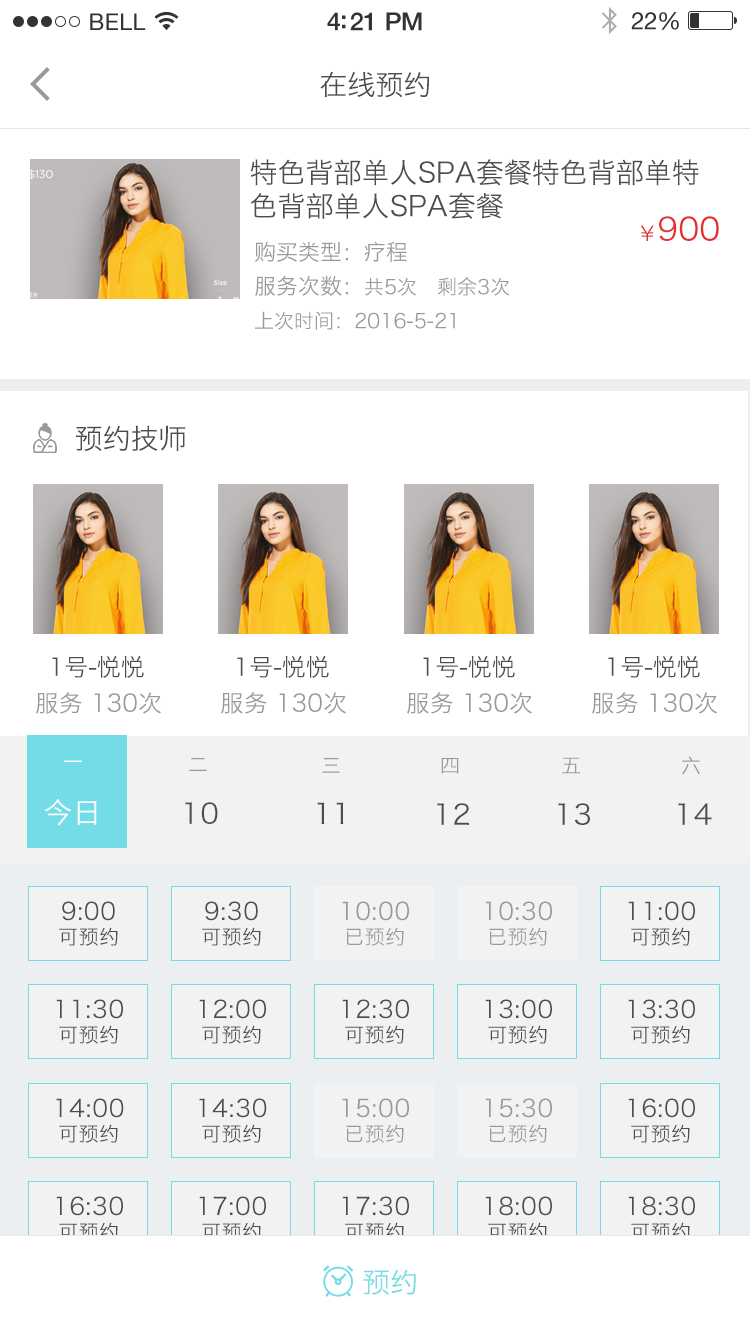
<style>
.page{position:relative;width:750px;height:1334px;background:#ffffff}
.page>*{position:absolute;margin:0}
.t1{font:28px "HiraginoSansGB-W3";color:#4d4d4d}
.t2{font:32px "HiraginoSansGB-W3";color:#e42f2f}
.t3{font:20px "HiraginoSansGB-W3";color:#999999}
.t4{font:20px "HiraginoSansGB-W3";color:#e42f2f}
.t5{font:20px/34px "HiraginoSansGB-W3";color:#999999}
.t6{font:22px/34px "HiraginoSansGB-W3";color:#999999}
.t7{font:24px "HiraginoSansGB-W3";color:#4d4d4d}
.t8{font:24px "HiraginoSansGB-W3";color:#999999}
.t9{font:20px "HiraginoSansGB-W3";letter-spacing:0.03em;color:#ffffff}
.t10{font:20px "HiraginoSansGB-W3";letter-spacing:0.03em;color:#999999}
.t11{font:28px "HiraginoSansGB-W3";letter-spacing:0.03em;color:#ffffff}
.t12{font:28px "HiraginoSansGB-W3";letter-spacing:0.03em;color:#4d4d4d}
.t13{font:24px/24px "HiraginoSansGB-W3";letter-spacing:0.03em;color:#4d4d4d}
.t14{font:20px/24px "HiraginoSansGB-W3";letter-spacing:0.03em;color:#4d4d4d}
.t15{font:24px/24px "HiraginoSansGB-W3";letter-spacing:0.03em;color:#999999}
.t16{font:20px/24px "HiraginoSansGB-W3";letter-spacing:0.03em;color:#999999}
.t17{font:28px "HiraginoSansGB-W3";color:#73dce6}
</style>
<div class="page">
<p class="t1" style="left:320px;top:71px;width:109px;height:27px">在线预约</p>
<p class="t1" style="left:250px;top:159px;width:449px;height:60px;text-align:justify">特色背部单人SPA套餐特色背部单特<br>色背部单人SPA套餐</p>
<p class="t2" style="left:640px;top:216px;width:79px;height:25px"><span class="t3">                                        </span><span class="t4">￥</span>900</p>
<p class="t5" style="left:254px;top:241px;width:256px;height:89px;text-align:justify"><span class="t6">购买类型：疗程<br>服务次数：</span>共5次   剩余3次<br>上次时间：2016-5-21</p>
<p class="t1" style="left:76px;top:425px;width:110px;height:27px">预约技师</p>
<p class="t7" style="left:52px;top:656px;width:92px;height:22px">1号-悦悦</p>
<p class="t7" style="left:237px;top:656px;width:92px;height:22px">1号-悦悦</p>
<p class="t7" style="left:423px;top:656px;width:92px;height:22px">1号-悦悦</p>
<p class="t7" style="left:608px;top:656px;width:92px;height:22px">1号-悦悦</p>
<p class="t8" style="left:36px;top:692px;width:125px;height:22px"><span class="t3">                                       </span>服务 130次</p>
<p class="t8" style="left:221px;top:692px;width:125px;height:22px"><span class="t3">                                       </span>服务 130次</p>
<p class="t8" style="left:407px;top:692px;width:125px;height:22px"><span class="t3">                                       </span>服务 130次</p>
<p class="t8" style="left:592px;top:692px;width:125px;height:22px"><span class="t3">                                       </span>服务 130次</p>
<p class="t9" style="left:64px;top:760px;width:18px;height:3px">一</p>
<p class="t10" style="left:189px;top:757px;width:18px;height:15px">二</p>
<p class="t10" style="left:322px;top:757px;width:18px;height:16px">三</p>
<p class="t10" style="left:441px;top:758px;width:18px;height:16px">四</p>
<p class="t10" style="left:562px;top:757px;width:18px;height:17px">五</p>
<p class="t10" style="left:681px;top:756px;width:19px;height:19px">六</p>
<p class="t11" style="left:44px;top:799px;width:53px;height:27px">今日</p>
<p class="t12" style="left:185px;top:802px;width:33px;height:22px">10</p>
<p class="t12" style="left:317px;top:802px;width:27px;height:22px">11</p>
<p class="t12" style="left:437px;top:803px;width:32px;height:22px">12</p>
<p class="t12" style="left:558px;top:803px;width:32px;height:22px">13</p>
<p class="t12" style="left:678px;top:803px;width:34px;height:22px">14</p>
<p class="t13" style="left:59px;top:901px;width:59px;height:45px;text-align:center">9:00<br><span class="t14">可预约</span></p>
<p class="t13" style="left:202px;top:901px;width:59px;height:45px;text-align:center">9:30<br><span class="t14">可预约</span></p>
<p class="t15" style="left:342px;top:901px;width:67px;height:45px;text-align:center">10:00<br><span class="t16">已预约</span></p>
<p class="t15" style="left:485px;top:901px;width:67px;height:45px;text-align:center">10:30<br><span class="t16">已预约</span></p>
<p class="t13" style="left:628px;top:901px;width:67px;height:45px;text-align:center">11:00<br><span class="t14">可预约</span></p>
<p class="t13" style="left:56px;top:999px;width:67px;height:45px;text-align:center">11:30<br><span class="t14">可预约</span></p>
<p class="t13" style="left:199px;top:999px;width:67px;height:45px;text-align:center">12:00<br><span class="t14">可预约</span></p>
<p class="t13" style="left:342px;top:999px;width:67px;height:45px;text-align:center">12:30<br><span class="t14">可预约</span></p>
<p class="t13" style="left:485px;top:999px;width:67px;height:45px;text-align:center">13:00<br><span class="t14">可预约</span></p>
<p class="t13" style="left:628px;top:999px;width:67px;height:45px;text-align:center">13:30<br><span class="t14">可预约</span></p>
<p class="t13" style="left:56px;top:1098px;width:68px;height:45px;text-align:center">14:00<br><span class="t14">可预约</span></p>
<p class="t13" style="left:199px;top:1098px;width:68px;height:45px;text-align:center">14:30<br><span class="t14">可预约</span></p>
<p class="t15" style="left:342px;top:1098px;width:67px;height:45px;text-align:center">15:00<br><span class="t16">已预约</span></p>
<p class="t15" style="left:485px;top:1098px;width:67px;height:45px;text-align:center">15:30<br><span class="t16">已预约</span></p>
<p class="t13" style="left:628px;top:1098px;width:67px;height:45px;text-align:center">16:00<br><span class="t14">可预约</span></p>
<p class="t13" style="left:56px;top:1196px;width:67px;height:45px;text-align:center">16:30<br><span class="t14">可预约</span></p>
<p class="t13" style="left:199px;top:1196px;width:67px;height:45px;text-align:center">17:00<br><span class="t14">可预约</span></p>
<p class="t13" style="left:342px;top:1196px;width:67px;height:45px;text-align:center">17:30<br><span class="t14">可预约</span></p>
<p class="t13" style="left:485px;top:1196px;width:67px;height:45px;text-align:center">18:00<br><span class="t14">可预约</span></p>
<p class="t13" style="left:628px;top:1196px;width:67px;height:45px;text-align:center">18:30<br><span class="t14">可预约</span></p>
<p class="t17" style="left:363px;top:1269px;width:53px;height:26px">预约</p>
</div>
